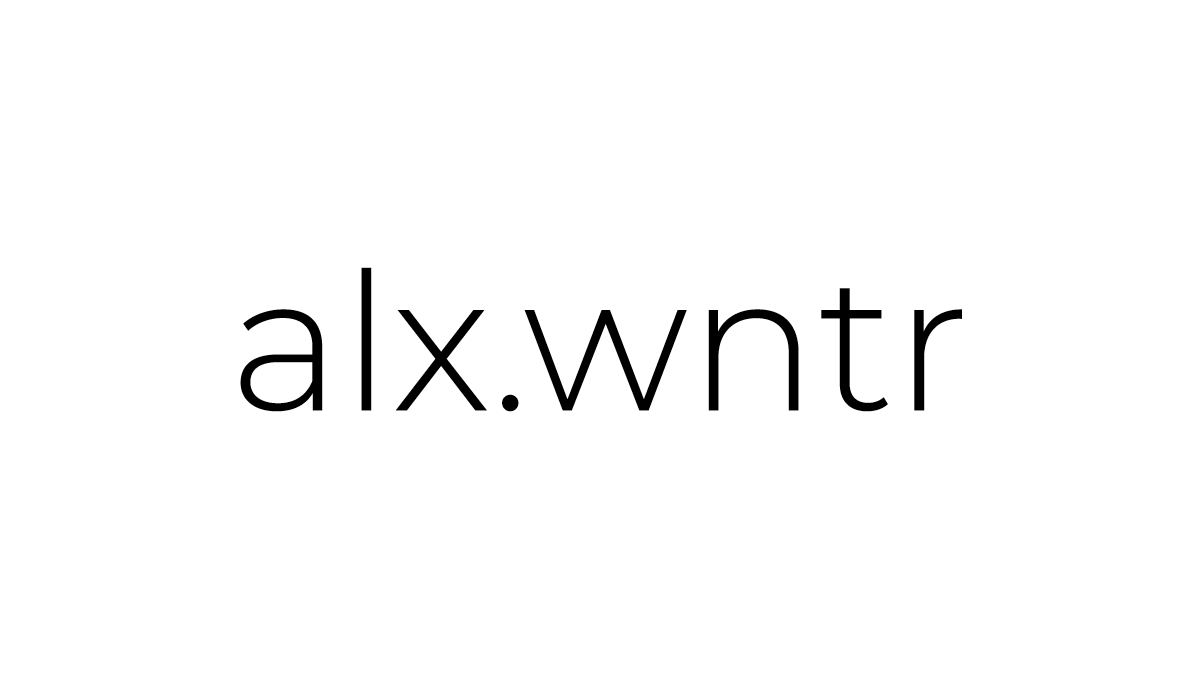
<style>
.page{position:relative;width:1200px;height:680px;background:#ffffff}
.page>*{position:absolute;margin:0}
.t1{font:192px "Montserrat-Light";color:#000000}
</style>
<div class="page">
<p class="t1" style="left:240px;top:267px;width:722px;height:145px">alx.wntr</p>
</div>
